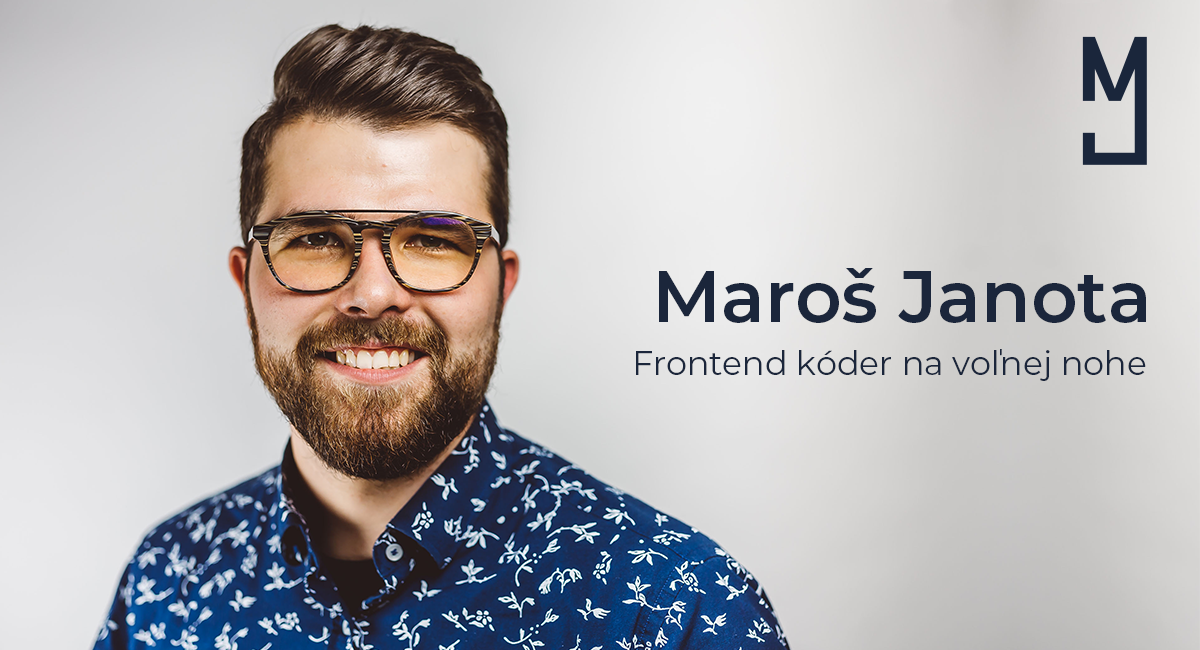
<style>
.page{position:relative;width:1200px;height:650px}
.page>*{position:absolute;margin:0}
.t1{font:72.4px "Montserrat-SemiBold";color:#1b263b}
.t2{font:33.3px "Montserrat-Regular";color:#1b263b}
</style>
<div class="page">
<p class="t1" style="left:659px;top:267px;width:487px;height:56px">Maroš Janota</p>
<p class="t2" style="left:636px;top:349px;width:510px;height:32px">Frontend kóder na voľnej nohe</p>
</div>
